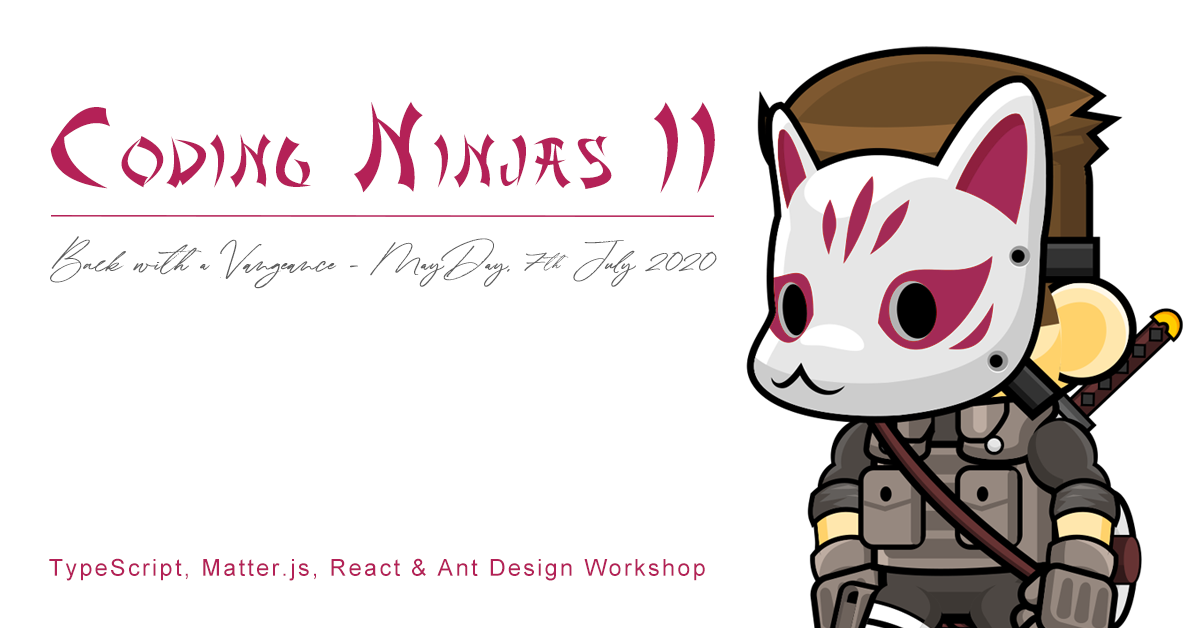
<style>
.page{position:relative;width:1196px;height:628px;background:#ffffff}
.page>*{position:absolute;margin:0}
.t1{font:66.3px "AsianDelight";letter-spacing:0.1em;color:#b42157;scale:0.93 1}
.t2{font:110.5px "AsianDelight";letter-spacing:0.1em;color:#b42157;scale:0.93 1}
.t3{font:18.3px/76.6px "Winterlady";color:#5e5e5e;font-weight:bold}
.t4{font:23.4px "ArialMT";letter-spacing:0.1em;color:#b42157}
</style>
<div class="page">
<p class="t1" style="left:50px;top:101px;width:665px;height:92px"><span class="t2">C</span>ODING<span class="t2"> N</span>INJAS<span class="t2"> II</span></p>
<p class="t3" style="left:50px;top:236px;width:667px;height:53px">Back with a Vangeance - MayDay, 7th July 2020</p>
<p class="t4" style="left:49px;top:558px;width:656px;height:23px">TypeScript, Matter.js, React &amp; Ant Design Workshop</p>
</div>
